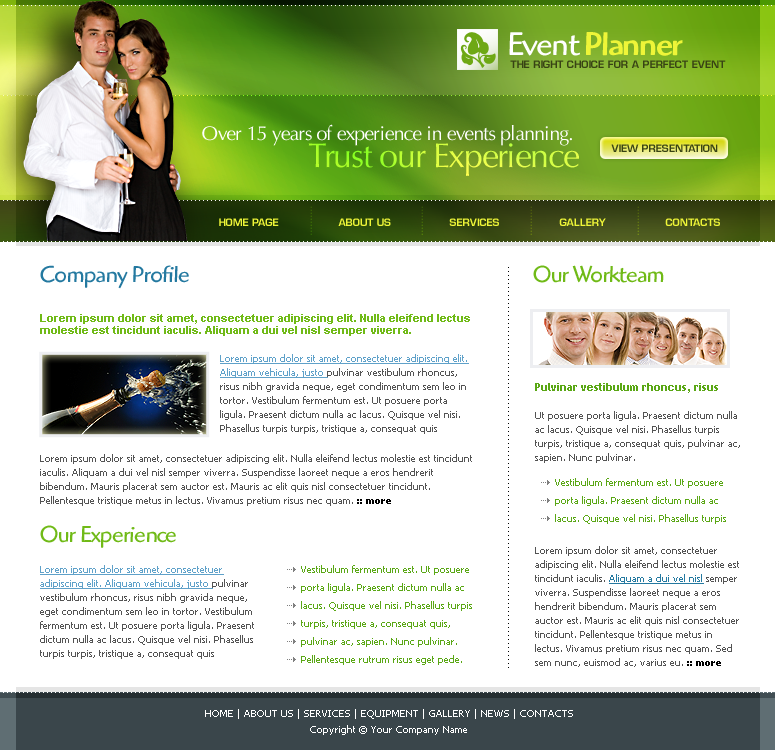
<style>
.page{position:relative;width:775px;height:750px;background:#ffffff}
.page>*{position:absolute;margin:0}
.t1{font:34px "HighlanderStd-Medium";letter-spacing:-0.04em;color:#eef538}
.t2{font:34px "HighlanderStd-Book";letter-spacing:-0.04em;color:#ffffff}
.t3{font:10px "EurostileLTStd-Demi";color:#384314;text-transform:uppercase}
.t4{font:20px "OptimaLTStd";letter-spacing:-0.04em;color:#ffffff}
.t5{font:34px "OptimaLTStd";letter-spacing:-0.04em}
.t6{font:8.3px "EurostileLTStd-Demi";text-transform:uppercase}
.t7{font:10px "EurostileLTStd-Demi";color:#eef538;text-transform:uppercase}
.t8{font:24px "HighlanderStd-Book";letter-spacing:-0.04em;color:#2479a0}
.t9{font:10px "TrebuchetMS";color:#000000}
.t10{font:24px "HighlanderStd-Book";letter-spacing:-0.04em;color:#70ba17}
.t11{font:11px/12px "Arial-BoldMT";color:#70ba17}
.t12{font:10px/14px "Tahoma";color:#535353}
.t13{font:10px/14px "Tahoma";color:#5fa1c9;text-decoration:underline}
.t14{font:11px/14px "TrebuchetMS-Bold";color:#5aa715}
.t15{font:10px/14px "Tahoma-Bold";color:#000000}
.t16{font:10px/18px "Tahoma";color:#5aa715}
.t17{font:10px/14px "Tahoma";color:#2479a0;text-decoration:underline}
.t18{font:10px/16px "Tahoma";color:#ffffff}
</style>
<div class="page">
<p class="t1" style="left:509px;top:32px;width:174px;height:24px"><span class="t2">Event </span>Planner</p>
<p class="t3" style="left:510px;top:60px;width:216px;height:8px">THE RIGHT CHOICE FOR A PERFECT EVENT</p>
<p class="t4" style="left:202px;top:124px;width:370px;height:22px">Over 15 years of experience in events planning.</p>
<p class="t5" style="left:308px;top:143px;width:271px;height:33px">Trust our Experience</p>
<p class="t3" style="left:611px;top:144px;width:107px;height:8px">VIEW PRESENTATION</p>
<p class="t6" style="left:310px;top:206px;width:2px;height:29px;rotate:90deg">..........</p>
<p class="t6" style="left:421px;top:206px;width:2px;height:29px;rotate:90deg">..........</p>
<p class="t6" style="left:530px;top:206px;width:2px;height:29px;rotate:90deg">..........</p>
<p class="t6" style="left:637px;top:206px;width:2px;height:29px;rotate:90deg">..........</p>
<p class="t7" style="left:219px;top:218px;width:60px;height:8px">HOME PAGE</p>
<p class="t7" style="left:338px;top:218px;width:53px;height:8px">ABOUT US</p>
<p class="t7" style="left:449px;top:218px;width:50px;height:8px">SERVICES</p>
<p class="t7" style="left:559px;top:218px;width:47px;height:8px">GALLERY</p>
<p class="t7" style="left:665px;top:218px;width:55px;height:8px">CONTACTS</p>
<p class="t8" style="left:40px;top:265px;width:149px;height:24px">Company Profile</p>
<p class="t9" style="left:508px;top:267px;width:1px;height:401px;rotate:90deg">.....................................................................................................</p>
<p class="t10" style="left:533px;top:265px;width:131px;height:18px">Our Workteam</p>
<p class="t11" style="left:40px;top:314px;width:430px;height:22px">Lorem ipsum dolor sit amet, consectetuer adipiscing elit. Nulla eleifend lectus molestie est tincidunt iaculis. Aliquam a dui vel nisl semper viverra.</p>
<p class="t12" style="left:220px;top:354px;width:249px;height:80px"><span class="t13">Lorem ipsum dolor sit amet, consectetuer adipiscing elit. Aliquam vehicula, justo </span>pulvinar vestibulum rhoncus, risus nibh gravida neque, eget condimentum sem leo in tortor. Vestibulum fermentum est. Ut posuere porta ligula. Praesent dictum nulla ac lacus. Quisque vel nisi. Phasellus turpis turpis, tristique a, consequat quis</p>
<p class="t12" style="left:535px;top:383px;width:205px;height:80px"><span class="t14">Pulvinar vestibulum rhoncus, risus <br><br></span>Ut posuere porta ligula. Praesent dictum nulla ac lacus. Quisque vel nisi. Phasellus turpis turpis, tristique a, consequat quis, pulvinar ac, sapien. Nunc pulvinar.</p>
<p class="t12" style="left:40px;top:454px;width:432px;height:52px">Lorem ipsum dolor sit amet, consectetuer adipiscing elit. Nulla eleifend lectus molestie est tincidunt iaculis. Aliquam a dui vel nisl semper viverra. Suspendisse laoreet neque a eros hendrerit bibendum. Mauris placerat sem auctor est. Mauris ac elit quis nisl consectetuer tincidunt. Pellentesque tristique metus in lectus. Vivamus pretium risus nec quam. <span class="t15">:: more</span></p>
<p class="t16" style="left:555px;top:478px;width:171px;height:46px">Vestibulum fermentum est. Ut posuere porta ligula. Praesent dictum nulla ac lacus. Quisque vel nisi. Phasellus turpis</p>
<p class="t10" style="left:40px;top:525px;width:136px;height:23px">Our Experience</p>
<p class="t12" style="left:535px;top:546px;width:204px;height:121px">Lorem ipsum dolor sit amet, consectetuer adipiscing elit. Nulla eleifend lectus molestie est tincidunt iaculis. <span class="t17">Aliquam a dui vel nisl</span> semper viverra. Suspendisse laoreet neque a eros hendrerit bibendum. Mauris placerat sem auctor est. Mauris ac elit quis nisl consectetuer tincidunt. Pellentesque tristique metus in lectus. Vivamus pretium risus nec quam. Sed sem nunc, euismod ac, varius eu. <span class="t15">:: more</span></p>
<p class="t12" style="left:40px;top:565px;width:214px;height:94px"><span class="t13">Lorem ipsum dolor sit amet, consectetuer adipiscing elit. Aliquam vehicula, justo </span>pulvinar vestibulum rhoncus, risus nibh gravida neque, eget condimentum sem leo in tortor. Vestibulum fermentum est. Ut posuere porta ligula. Praesent dictum nulla ac lacus. Quisque vel nisi. Phasellus turpis turpis, tristique a, consequat quis</p>
<p class="t16" style="left:301px;top:565px;width:171px;height:100px">Vestibulum fermentum est. Ut posuere porta ligula. Praesent dictum nulla ac lacus. Quisque vel nisi. Phasellus turpis turpis, tristique a, consequat quis, pulvinar ac, sapien. Nunc pulvinar. Pellentesque rutrum risus eget pede.</p>
<p class="t18" style="left:205px;top:709px;width:368px;height:26px;text-align:center">HOME | ABOUT US | SERVICES | EQUIPMENT | GALLERY | NEWS | CONTACTS<br>Copyright © Your Company Name</p>
</div>
